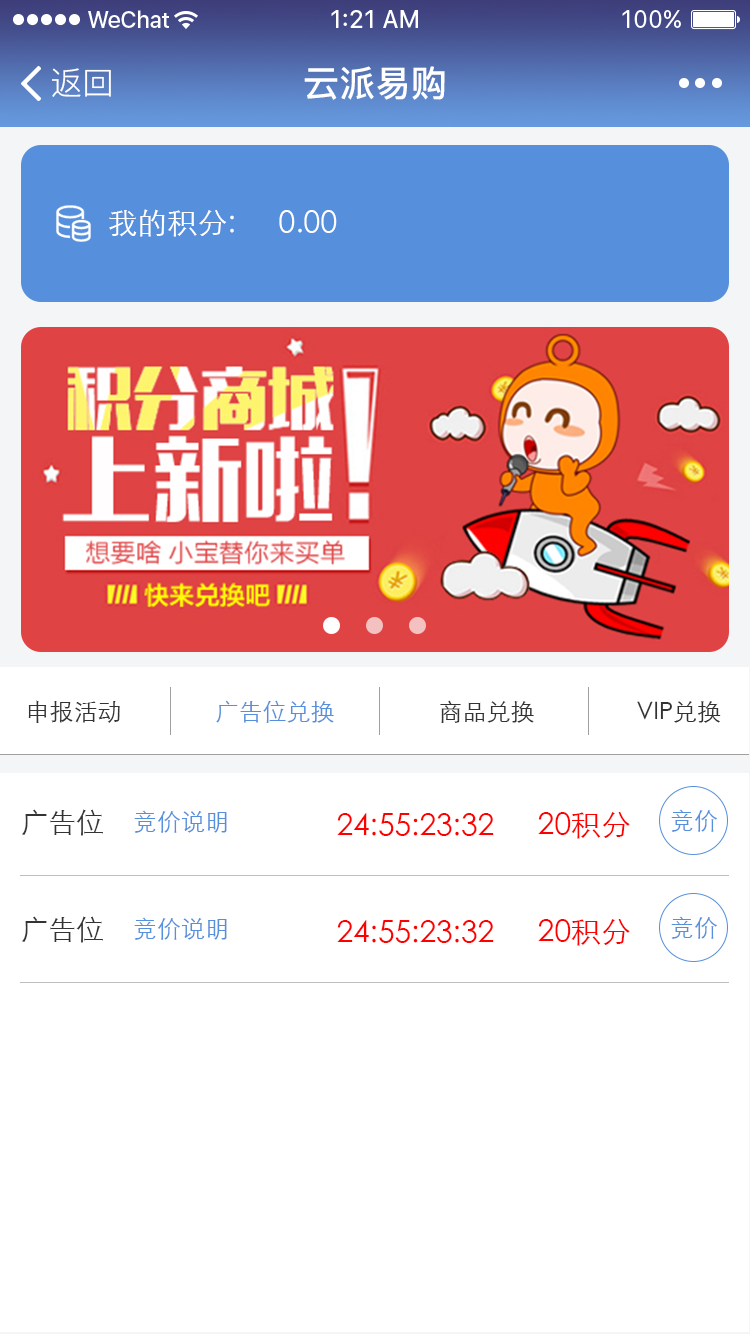
<style>
.page{position:relative;width:750px;height:1334px;background:#ffffff}
.page>*{position:absolute;margin:0}
.t1{font:32px "PingFang-SC-Regular";color:#ffffff}
.t2{font:36px "PingFang-SC-Bold";color:#ffffff}
.t3{font:30px "STXihei";color:#ffffff}
.t4{font:24px "STXihei";color:#333333}
.t5{font:24px "STXihei";color:#568fdc}
.t6{font:28px "STXihei";color:#333333}
.t7{font:30px "STXihei";color:#ff0000}
</style>
<div class="page">
<p class="t1" style="left:52px;top:68px;width:59px;height:29px">返回</p>
<p class="t2" style="left:304px;top:66px;width:141px;height:34px">云派易购</p>
<p class="t3" style="left:109px;top:209px;width:125px;height:28px">我的积分:</p>
<p class="t3" style="left:279px;top:210px;width:58px;height:23px">0.00</p>
<p class="t4" style="left:28px;top:700px;width:92px;height:23px">申报活动</p>
<p class="t5" style="left:216px;top:700px;width:118px;height:23px">广告位兑换</p>
<p class="t4" style="left:440px;top:700px;width:94px;height:23px">商品兑换</p>
<p class="t4" style="left:637px;top:701px;width:84px;height:22px">VIP兑换</p>
<p class="t6" style="left:22px;top:809px;width:81px;height:27px">广告位</p>
<p class="t5" style="left:671px;top:809px;width:46px;height:23px">竞价</p>
<p class="t5" style="left:134px;top:810px;width:93px;height:23px">竞价说明</p>
<p class="t7" style="left:337px;top:813px;width:157px;height:23px">24:55:23:32</p>
<p class="t7" style="left:538px;top:812px;width:92px;height:27px">20积分</p>
<p class="t6" style="left:22px;top:916px;width:81px;height:27px">广告位</p>
<p class="t5" style="left:134px;top:917px;width:93px;height:23px">竞价说明</p>
<p class="t5" style="left:671px;top:916px;width:46px;height:23px">竞价</p>
<p class="t7" style="left:337px;top:920px;width:157px;height:23px">24:55:23:32</p>
<p class="t7" style="left:538px;top:919px;width:92px;height:27px">20积分</p>
</div>
